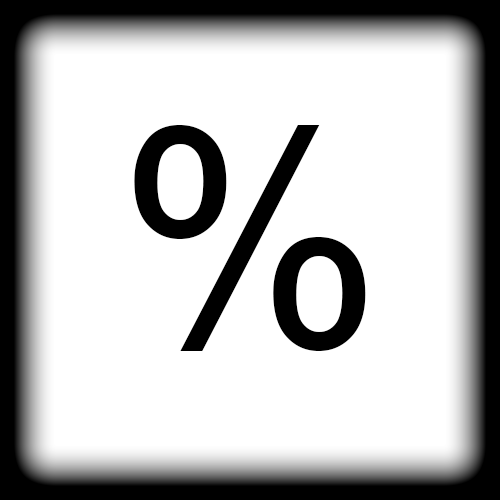
<style>
.page{position:relative;width:500px;height:500px;background:#ffffff}
.page>*{position:absolute;margin:0}
.t1{font:300px "ArialMT";color:#000000}
</style>
<div class="page">
<p class="t1" style="left:134px;top:125px;width:232px;height:226px">%</p>
</div>
